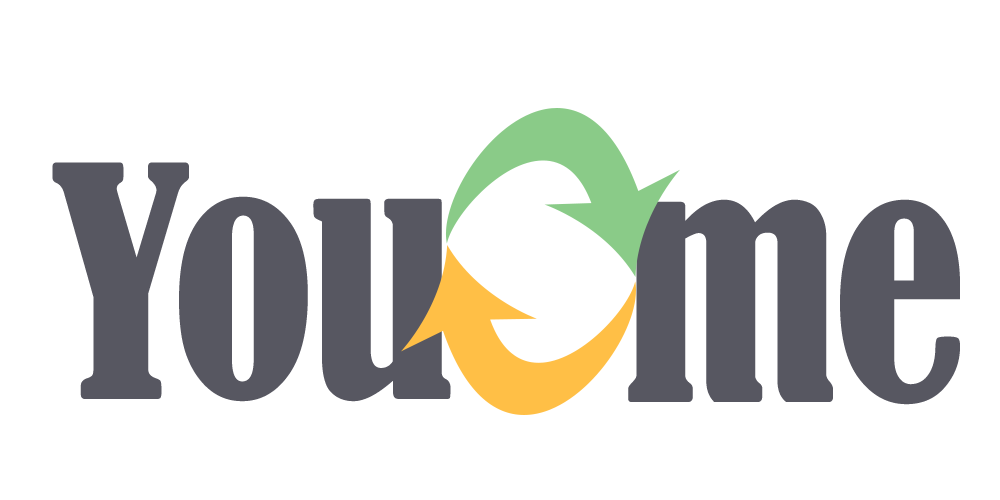
<style>
.page{position:relative;width:1000px;height:500px;background:#ffffff}
.page>*{position:absolute;margin:0}
.t1{font:300px "BernardMT-Condensed";letter-spacing:-0.025em;color:#575761}
</style>
<div class="page">
<p class="t1" style="left:52px;top:162px;width:399px;height:240px">You</p>
<p class="t1" style="left:628px;top:199px;width:332px;height:206px">me</p>
</div>
